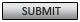
<style>
.page{position:relative;width:80px;height:22px;background:#ffffff}
.page>*{position:absolute;margin:0}
.t1{font:12px "Calibri";color:#262626}
</style>
<div class="page">
<p class="t1" style="left:22px;top:7px;width:39px;height:8px">SUBMIT</p>
</div>
